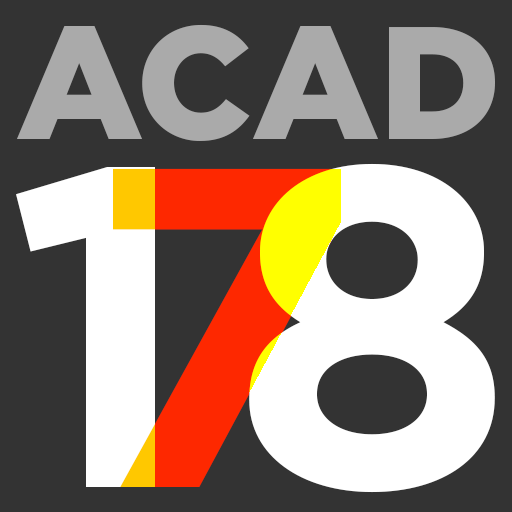
<style>
.page{position:relative;width:512px;height:512px;background:#333333}
.page>*{position:absolute;margin:0}
.t1{font:160px "Gotham-Black";color:#aaaaaa}
.t2{font:454px "Gotham-Bold";color:#ffffff}
.t3{font:454px "Gotham-Bold"}
</style>
<div class="page">
<p class="t1" style="left:17px;top:24px;width:478px;height:117px">ACAD</p>
<p class="t2" style="left:16px;top:167px;width:139px;height:320px">1</p>
<p class="t3" style="left:113px;top:168px;width:229px;height:319px">7</p>
<p class="t2" style="left:249px;top:163px;width:246px;height:330px">8</p>
</div>
